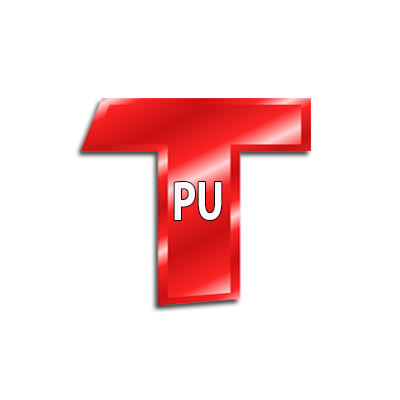
<style>
.page{position:relative;width:400px;height:400px;background:#ffffff}
.page>*{position:absolute;margin:0}
.t1{font:56.1px "MyriadPro-Bold";color:#fdfafa;scale:0.74 1}
</style>
<div class="page">
<p class="t1" style="left:174px;top:182px;width:48px;height:38px">PU</p>
</div>
